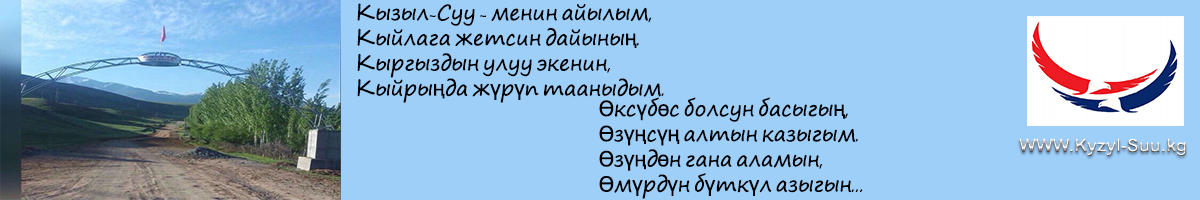
<style>
.page{position:relative;width:1200px;height:200px;background:#9dcff9}
.page>*{position:absolute;margin:0}
.t1{font:21px "SegoePrint";color:#000000}
.t2{font:21px "Pristina-Regular";color:#000000}
.t3{font:21px "Tahoma";color:#000000}
</style>
<div class="page">
<p class="t1" style="left:357px;top:3px;width:307px;height:100px">Кызыл<span class="t2">-</span>Суу<span class="t2"> - </span>менин айылым<span class="t2">,<br></span>Кыйлага жетсин дайыны<span class="t3">ң</span><span class="t2">.<br></span>Кыргыздын улуу экенин<span class="t2">,<br></span>Кыйры<span class="t3">ң</span>да ж<span class="t3">ү</span>р<span class="t3">ү</span>п тааныдым<span class="t2">.</span></p>
<p class="t1" style="left:599px;top:97px;width:264px;height:102px"><span class="t3">Ө</span>кс<span class="t3">ү</span>б<span class="t3">ө</span>с болсун басыгы<span class="t3">ң</span><span class="t2">,<br></span><span class="t3">Ө</span>з<span class="t3">үң</span>с<span class="t3">үң </span>алтын казыгым<span class="t2">.<br></span><span class="t3">Ө</span>з<span class="t3">үң</span>д<span class="t3">ө</span>н гана аламын<span class="t2">,<br></span><span class="t3">Ө</span>м<span class="t3">ү</span>рд<span class="t3">ү</span>н б<span class="t3">ү</span>тк<span class="t3">ү</span>л азыгын<span class="t2">...</span></p>
</div>
